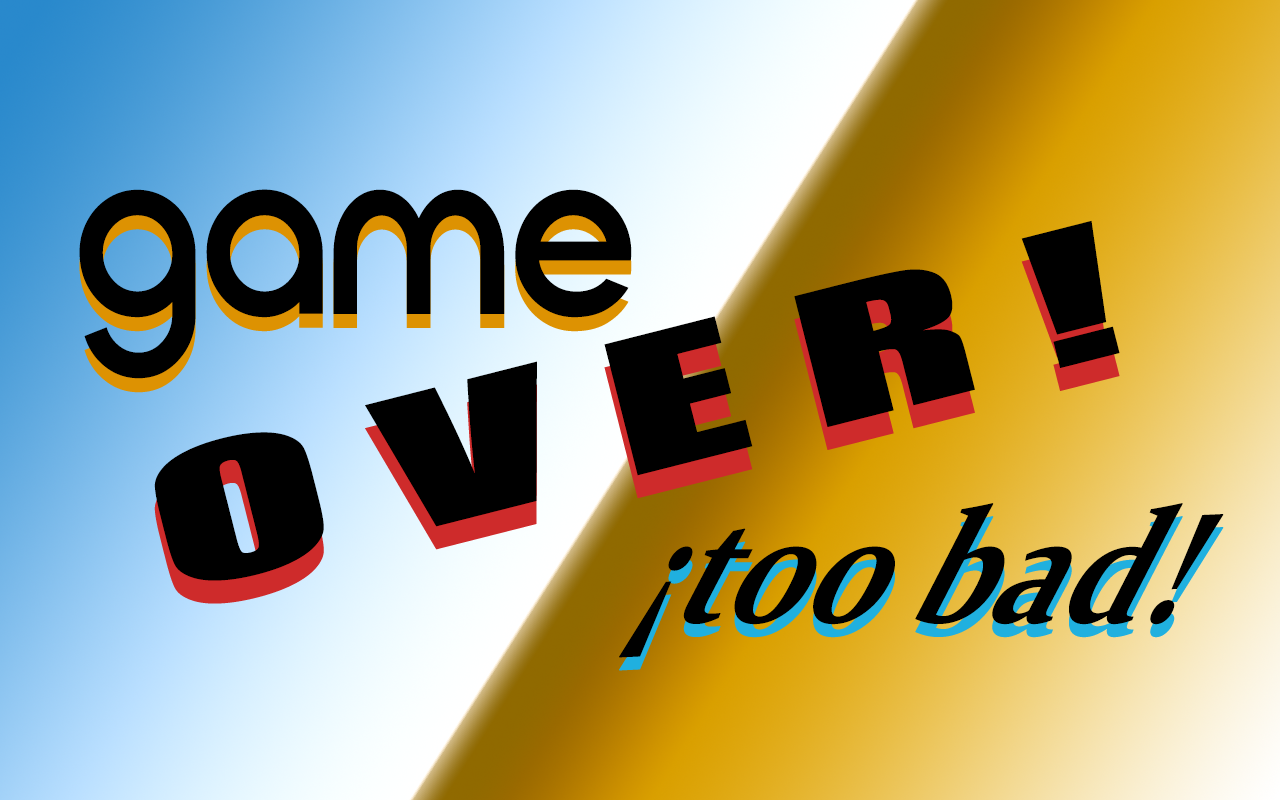
<style>
.page{position:relative;width:1280px;height:800px}
.page>*{position:absolute;margin:0}
.t1{font:247.7px "Cirqua-Regular";color:#000000;scale:0.76 1}
.t2{font:170.4px "Impact";color:#000000;scale:1.94 1}
.t3{font:181.4px "Constantia-Bold";color:#000000;scale:0.72 1}
</style>
<div class="page">
<p class="t1" style="left:79px;top:189px;width:553px;height:190px">game</p>
<p class="t2" style="left:154px;top:220px;width:966px;height:361px;rotate:-14deg">O V E R !</p>
<p class="t3" style="left:619px;top:503px;width:605px;height:155px">¡too bad!</p>
</div>
